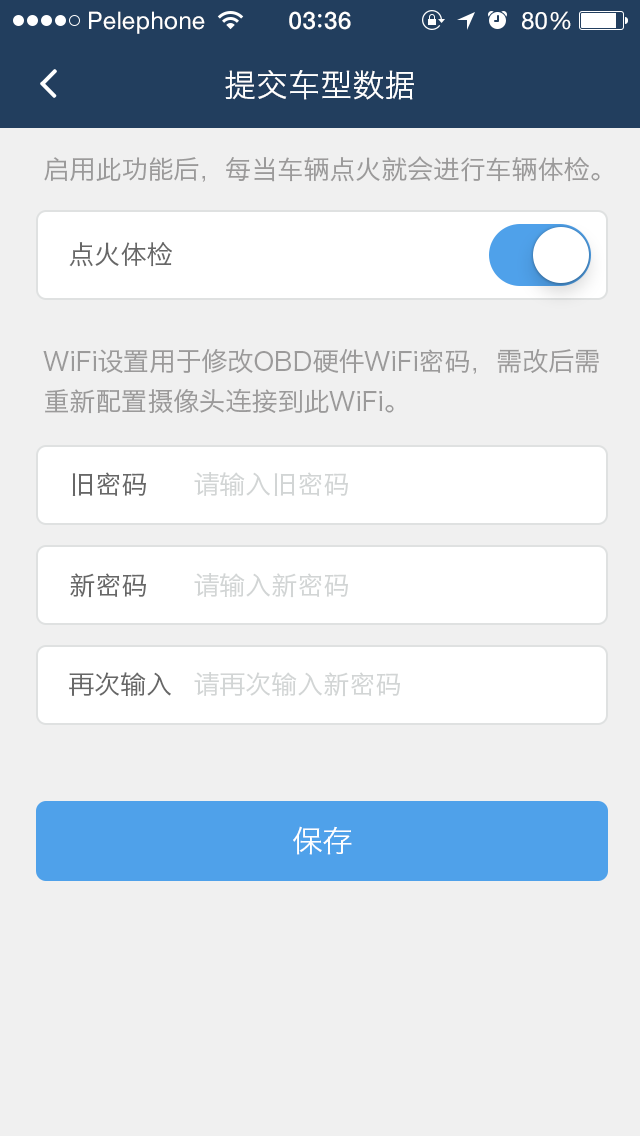
<style>
.page{position:relative;width:640px;height:1136px;background:#f0f0f0}
.page>*{position:absolute;margin:0}
.t1{font:24px "HelveticaNeue";letter-spacing:0.02em;color:#ffffff}
.t2{font:24px "HelveticaNeue-Medium";letter-spacing:0.03em;color:#ffffff}
.t3{font:32px "HiraginoSansGB-W3";color:#ffffff}
.t4{font:26px "HiraginoSansGB-W3";color:#9b9a9a}
.t5{font:26px "HiraginoSansGB-W3";color:#676767}
.t6{font:26px/40px "HiraginoSansGB-W3";color:#9b9a9a}
.t7{font:26px "HiraginoSansGB-W3";color:#d2d5d5}
.t8{font:30px "HiraginoSansGB-W3";color:#ffffff}
</style>
<div class="page">
<p class="t1" style="left:89px;top:11px;width:116px;height:23px">Pelephone</p>
<p class="t2" style="left:289px;top:11px;width:62px;height:19px">03 36</p>
<p class="t1" style="left:522px;top:11px;width:49px;height:19px">80%</p>
<p class="t3" style="left:225px;top:70px;width:189px;height:30px">提交车型数据</p>
<p class="t4" style="left:44px;top:156px;width:556px;height:26px">启用此功能后，每当车辆点火就会进行车辆体检。</p>
<p class="t5" style="left:69px;top:242px;width:103px;height:25px">点火体检</p>
<p class="t6" style="left:43px;top:349px;width:556px;height:65px">WiFi设置用于修改OBD硬件WiFi密码，需改后需<br>重新配置摄像头连接到此WiFi。</p>
<p class="t5" style="left:72px;top:472px;width:74px;height:24px">旧密码</p>
<p class="t7" style="left:194px;top:472px;width:154px;height:24px">请输入旧密码</p>
<p class="t5" style="left:70px;top:573px;width:76px;height:25px">新密码</p>
<p class="t7" style="left:194px;top:573px;width:154px;height:25px">请输入新密码</p>
<p class="t5" style="left:69px;top:672px;width:102px;height:24px">再次输入</p>
<p class="t7" style="left:194px;top:672px;width:206px;height:25px">请再次输入新密码</p>
<p class="t8" style="left:293px;top:826px;width:59px;height:29px">保存</p>
</div>
